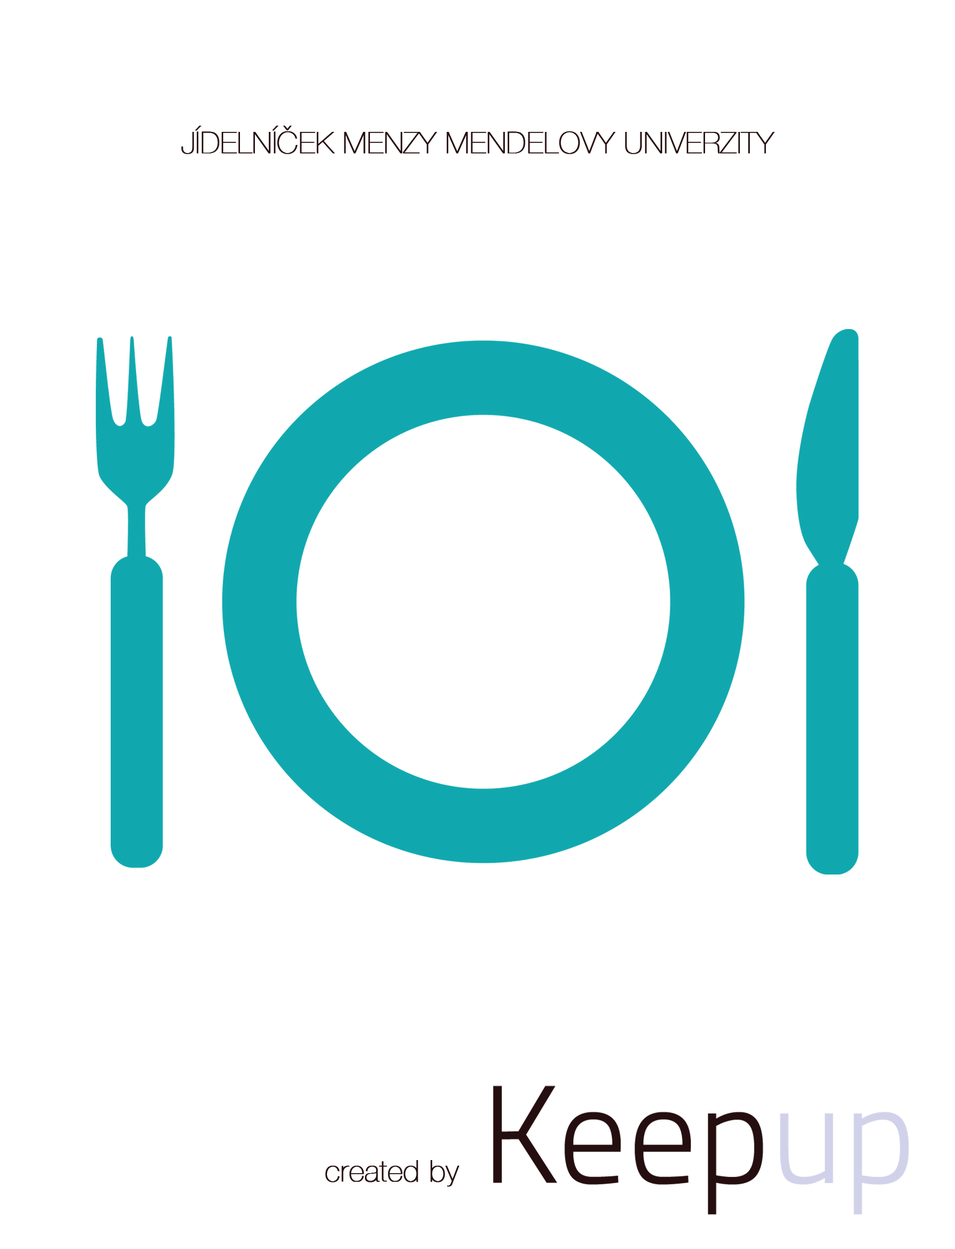
<style>
.page{position:relative;width:955px;height:1249px;background:#ffffff}
.page>*{position:absolute;margin:0}
.t1{font:29.8px "HelveticaNeue-UltraLight";color:#250e0f;text-transform:uppercase;font-weight:bold}
.t2{font:29.8px "HelveticaNeue-UltraLight";color:#250e0f;font-weight:bold}
</style>
<div class="page">
<p class="t1" style="left:181px;top:126px;width:594px;height:28px">Jídelníček menzy mendelovy univerzity</p>
<p class="t2" style="left:325px;top:1160px;width:134px;height:26px">created by</p>
</div>
